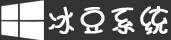
<style>
.page{position:relative;width:171px;height:40px;background:#333333}
.page>*{position:absolute;margin:0}
.t1{font:30px "HYj2gj";color:#ffffff;font-weight:bold}
</style>
<div class="page">
<p class="t1" style="left:48px;top:6px;width:120px;height:29px">冰豆系统</p>
</div>
